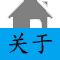
<style>
.page{position:relative;width:60px;height:60px;background:#02a4ef}
.page>*{position:absolute;margin:0}
.t1{font:24px "¿¬Ìå";color:#000000}
</style>
<div class="page">
<p class="t1" style="left:9px;top:32px;width:44px;height:22px">关于</p>
</div>
